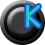
<style>
.page{position:relative;width:45px;height:45px}
.page>*{position:absolute;margin:0}
.t1{font:28.8px "OCRAStd";color:#23cdcb;scale:0.96 1}
</style>
<div class="page">
<p class="t1" style="left:26px;top:5px;width:14px;height:22px">K</p>
</div>
